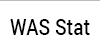
<style>
.page{position:relative;width:100px;height:50px;background:#ffffff}
.page>*{position:absolute;margin:0}
.t1{font:22px "RobotoCondensed-Regular";color:#000000}
</style>
<div class="page">
<p class="t1" style="left:10px;top:19px;width:80px;height:16px">WAS Stat</p>
</div>
